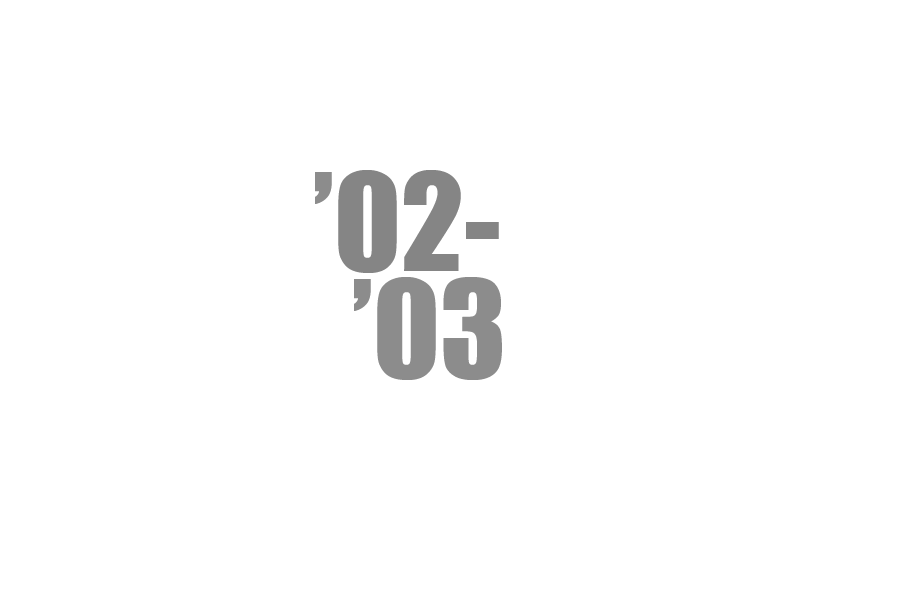
<style>
.page{position:relative;width:900px;height:600px;background:#ffffff}
.page>*{position:absolute;margin:0}
.t1{font:125px "Impact";color:#858585}
.t2{font:125px "Impact";color:#8c8c8c}
</style>
<div class="page">
<p class="t1" style="left:315px;top:170px;width:184px;height:103px"><span class="t2">’</span>02-</p>
<p class="t2" style="left:354px;top:277px;width:148px;height:103px">’03</p>
</div>
